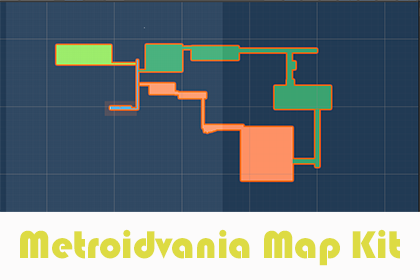
<style>
.page{position:relative;width:420px;height:280px}
.page>*{position:absolute;margin:0}
.t1{font:40px "STHupo";color:#dddb43}
</style>
<div class="page">
<p class="t1" style="left:20px;top:229px;width:380px;height:37px">Metroidvania Map Kit</p>
</div>
